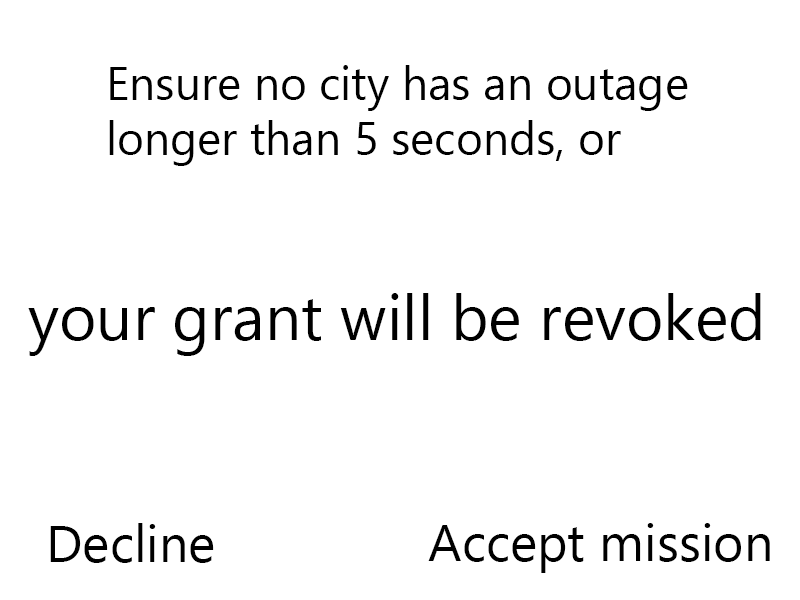
<style>
.page{position:relative;width:800px;height:600px;background:#ffffff}
.page>*{position:absolute;margin:0}
.t1{font:46px "SegoeUI";color:#000000}
.t2{font:64px "SegoeUI";color:#000000}
.t3{font:52px "SegoeUI";color:#000000}
</style>
<div class="page">
<p class="t1" style="left:109px;top:65px;width:579px;height:101px">Ensure no city has an outage <br>longer than 5 seconds, or</p>
<p class="t2" style="left:28px;top:293px;width:733px;height:63px">your grant will be revoked</p>
<p class="t3" style="left:50px;top:523px;width:164px;height:40px">Decline</p>
<p class="t3" style="left:428px;top:523px;width:342px;height:50px">Accept mission</p>
</div>
